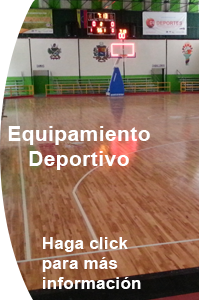
<style>
.page{position:relative;width:199px;height:300px}
.page>*{position:absolute;margin:0}
.t1{font:20.8px "Arial-BoldMT";letter-spacing:0.024em;color:#ffffff}
.t2{font:16.7px "Arial-BoldMT";letter-spacing:0.024em;color:#ffffff}
</style>
<div class="page">
<p class="t1" style="left:8px;top:126px;width:142px;height:44px;text-align:center">Equipamiento<br>Deportivo</p>
<p class="t2" style="left:42px;top:237px;width:99px;height:52px">Haga click <br>para más<br>información</p>
</div>
